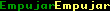
<style>
.page{position:relative;width:110px;height:11px;background:#000000}
.page>*{position:absolute;margin:0}
.t1{font:13.2px "Onesize";color:#009900;scale:0.91 1}
.t2{font:13.2px "Onesize";color:#ffff66;scale:0.91 1}
</style>
<div class="page">
<p class="t1" style="left:0px;top:1px;width:55px;height:10px">Empujar</p>
<p class="t2" style="left:55px;top:1px;width:55px;height:10px">Empujar</p>
</div>
